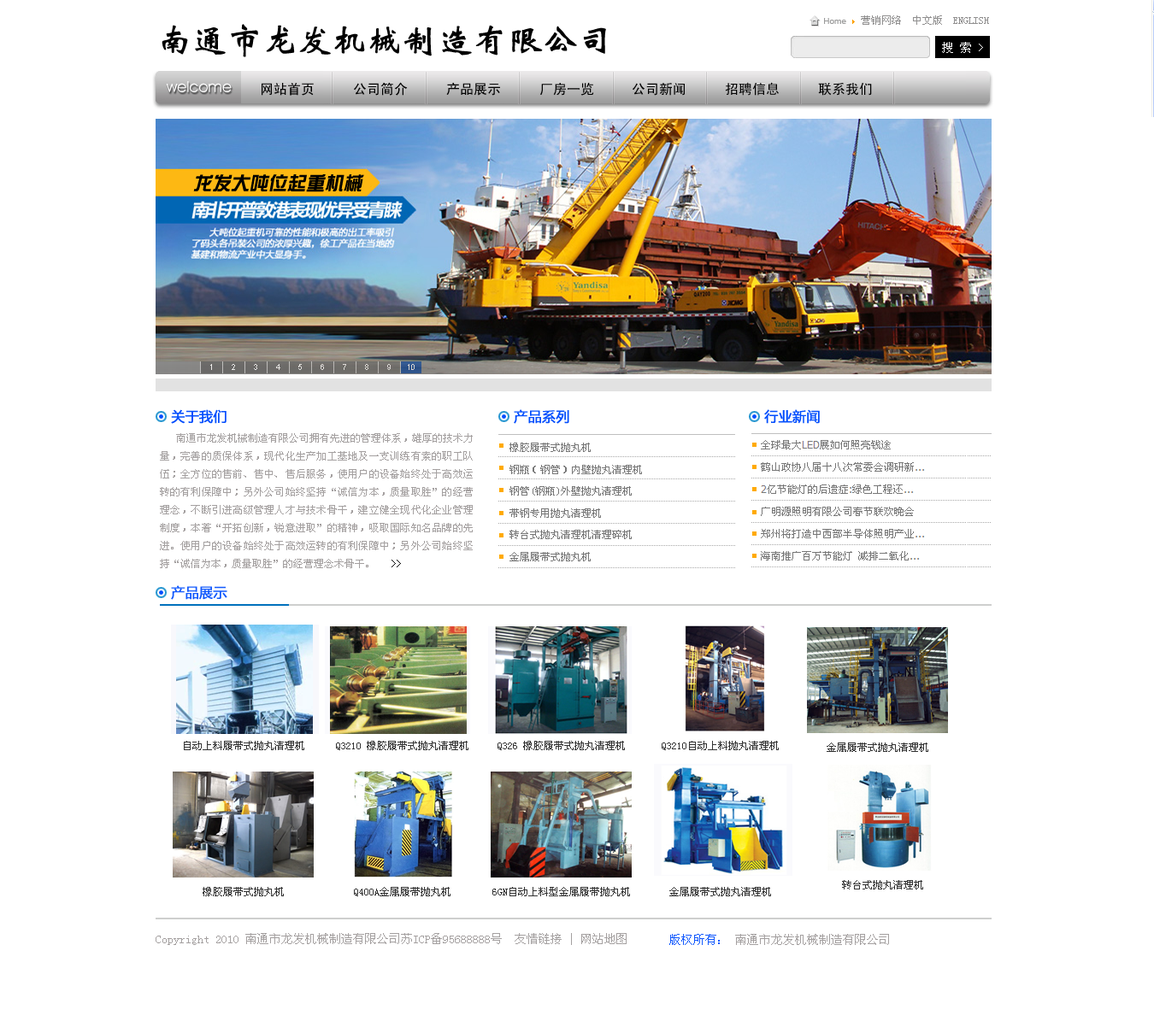
<style>
.page{position:relative;width:1154px;height:1033px;background:#ffffff}
.page>*{position:absolute;margin:0}
.t1{font:34.2px "STXinwei";color:#000000;font-weight:bold}
.t2{font:12px "SimSun";color:#ffffff}
.t3{font:15.4px "AvantGardeITCbyBT-Book";color:#ffffff}
.t4{font:13.7px "SimHei";color:#000000}
.t5{font:18.8px "DFZongYi-Bd-80-Win-GB";color:#000000;font-style:italic}
.t6{font:13.7px "MicrosoftYaHei";color:#004dfd;font-weight:bold}
.t7{font:10.3px "SimSun";color:#a4a0a0}
.t8{font:10.3px "SimSun";color:#000000}
.t9{font:10.3px "SimSun";color:#777777}
.t10{font:13.7px "MicrosoftYaHei";color:#1058fd;font-weight:bold}
.t11{font:12px "SimSun";color:#a4a0a0}
.t12{font:12px "SimSun";color:#1058fd}
</style>
<div class="page">
<p class="t1" style="left:162px;top:24px;width:444px;height:33px">南通市龙发机械制造有限公司</p>
<p class="t2" style="left:942px;top:42px;width:41px;height:11px">搜 索 &gt;</p>
<p class="t3" style="left:166px;top:81px;width:66px;height:11px">welcome</p>
<p class="t4" style="left:262px;top:83px;width:52px;height:13px">网站首页</p>
<p class="t4" style="left:354px;top:82px;width:54px;height:14px">公司简介</p>
<p class="t4" style="left:446px;top:82px;width:54px;height:14px">产品展示</p>
<p class="t4" style="left:540px;top:82px;width:54px;height:14px">厂房一览</p>
<p class="t4" style="left:633px;top:83px;width:52px;height:13px">公司新闻</p>
<p class="t4" style="left:725px;top:82px;width:54px;height:14px">招聘信息</p>
<p class="t4" style="left:818px;top:83px;width:54px;height:13px">联系我们</p>
<p class="t5" style="left:193px;top:174px;width:171px;height:18px">龙发大吨位起重机械</p>
<p class="t6" style="left:171px;top:409px;width:56px;height:15px">关于我们</p>
<p class="t6" style="left:514px;top:409px;width:55px;height:15px">产品系列</p>
<p class="t6" style="left:764px;top:409px;width:56px;height:15px">行业新闻</p>
<p class="t7" style="left:160px;top:433px;width:313px;height:135px;text-align:justify">南通市龙发机械制造有限公司拥有先进的管理体系，雄厚的技术力量，完善的质保体系，现代化生产加工基地及一支训练有素的职工队伍；全方位的售前、售中、售后服务，使用户的设备始终处于高效运转的有利保障中；另外公司始终坚持“诚信为本，质量取胜”的经营理念，不断引进高级管理人才与技术骨干，建立健全现代化企业管理制度，本着“开拓创新，锐意进取”的精神，吸取国际知名品牌的先进。使用户的设备始终处于高效运转的有利保障中；另外公司始终坚持“诚信为本，质量取胜”的经营理念术骨干。   <span class="t8">&gt;&gt;</span></p>
<p class="t9" style="left:509px;top:443px;width:82px;height:9px">橡胶履带式抛丸机</p>
<p class="t9" style="left:509px;top:465px;width:133px;height:9px">钢瓶（钢管）内壁抛丸清理机</p>
<p class="t9" style="left:509px;top:486px;width:123px;height:10px">钢管(钢瓶)外壁抛丸清理机</p>
<p class="t9" style="left:509px;top:509px;width:92px;height:9px">带钢专用抛丸清理机</p>
<p class="t9" style="left:509px;top:530px;width:123px;height:9px">转台式抛丸清理机清理碎机</p>
<p class="t9" style="left:509px;top:552px;width:82px;height:10px">金属履带式抛丸机</p>
<p class="t10" style="left:171px;top:586px;width:56px;height:14px">产品展示</p>
<p class="t11" style="left:156px;top:933px;width:471px;height:12px">Copyright 2010 南通市龙发机械制造有限公司苏ICP备95688888号  友情链接 | 网站地图</p>
<p class="t11" style="left:669px;top:934px;width:220px;height:11px"><span class="t12">版权所有：</span> 南通市龙发机械制造有限公司</p>
</div>
